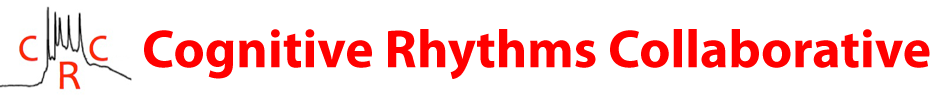
<style>
.page{position:relative;width:943px;height:104px;background:#ffffff}
.page>*{position:absolute;margin:0}
.t1{font:54px "MyriadPro-Bold";color:#ff0000}
</style>
<div class="page">
<p class="t1" style="left:144px;top:29px;width:786px;height:50px">Cognitive Rhythms Collaborative</p>
</div>
